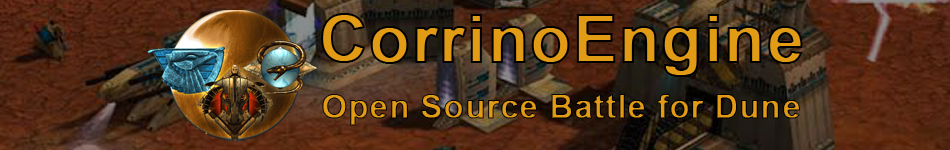
<style>
.page{position:relative;width:950px;height:150px}
.page>*{position:absolute;margin:0}
.t1{font:66.7px "Arial-BoldMT";font-weight:bold}
.t2{font:33.3px "Arial-BoldMT";font-weight:bold}
</style>
<div class="page">
<p class="t1" style="left:321px;top:13px;width:482px;height:64px">CorrinoEngine</p>
<p class="t2" style="left:322px;top:94px;width:478px;height:32px">Open Source Battle for Dune</p>
</div>
